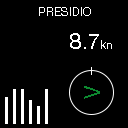
<style>
.page{position:relative;width:128px;height:128px;background:#000000}
.page>*{position:absolute;margin:0}
.t1{font:12px "HelveticaNeue";color:#ffffff}
.t2{font:22px "HelveticaNeue";color:#ffffff}
.t3{font:22px "HelveticaNeue";color:#0d8930}
</style>
<div class="page">
<p class="t1" style="left:39px;top:7px;width:52px;height:9px">PRESIDIO</p>
<p class="t2" style="left:70px;top:33px;width:42px;height:16px">8.7<span class="t1">kn</span></p>
<p class="t3" style="left:84px;top:86px;width:16px;height:13px;rotate:-90deg">V</p>
</div>
